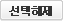
<style>
.page{position:relative;width:63px;height:21px}
.page>*{position:absolute;margin:0}
.t1{font:11px "YDIWebDotum";color:#333333;font-weight:bold}
</style>
<div class="page">
<p class="t1" style="left:9px;top:6px;width:43px;height:10px">선택해제</p>
</div>
